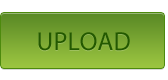
<style>
.page{position:relative;width:168px;height:80px;background:#ffffff}
.page>*{position:absolute;margin:0}
.t1{font:26px "MyriadPro-Regular";color:#235900}
.t2{font:20px "MyriadPro-Regular";color:#235900}
</style>
<div class="page">
<p class="t1" style="left:38px;top:32px;width:92px;height:19px"><span class="t2">  </span>    UPLOAD</p>
</div>
